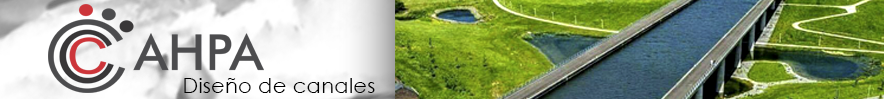
<style>
.page{position:relative;width:884px;height:99px}
.page>*{position:absolute;margin:0}
.t1{font:21.5px "CenturyGothic";color:#000000}
</style>
<div class="page">
<p class="t1" style="left:184px;top:78px;width:191px;height:15px">Diseño de canales</p>
</div>
